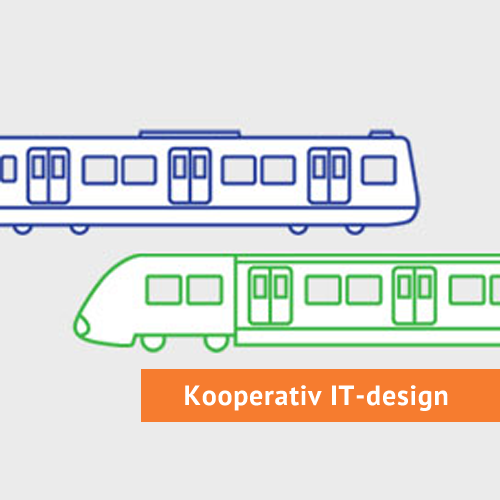
<style>
.page{position:relative;width:500px;height:500px;background:#ebebeb}
.page>*{position:absolute;margin:0}
.t1{font:28.1px "PTSans-Bold";letter-spacing:0.025em;color:#ffffff}
</style>
<div class="page">
<p class="t1" style="left:185px;top:385px;width:263px;height:26px">Kooperativ IT-design</p>
</div>
